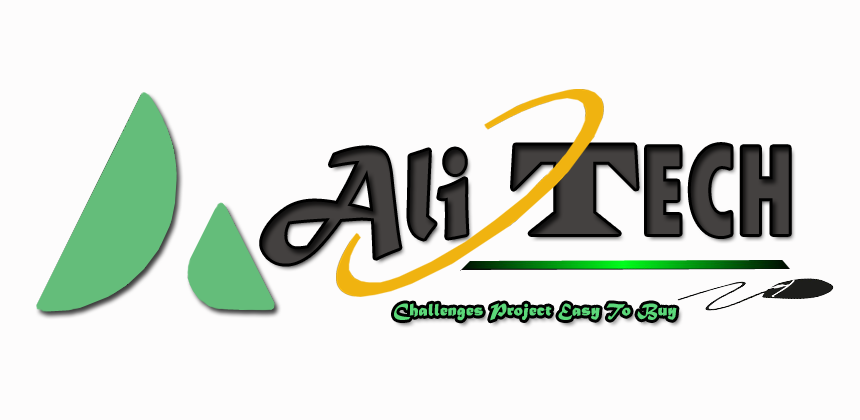
<style>
.page{position:relative;width:860px;height:420px;background:#fdfcfc}
.page>*{position:absolute;margin:0}
.t1{font:131.8px "MaturaMTScriptCapitals";color:#444140;font-weight:bold;scale:0.8 1}
.t2{font:131.8px "LatinWide";color:#444140;font-weight:bold;scale:0.8 1}
.t3{font:131.8px "TwCenMT-CondensedExtraBold";color:#444140;font-weight:bold;scale:0.8 1}
.t4{font:18px "MaturaMTScriptCapitals";color:#5bd879;font-weight:bold}
</style>
<div class="page">
<p class="t1" style="left:262px;top:145px;width:527px;height:119px">Ali <span class="t2">T</span><span class="t3">ECH</span></p>
<p class="t4" style="left:394px;top:303px;width:283px;height:18px">Challenges Project Easy To Buy</p>
</div>
